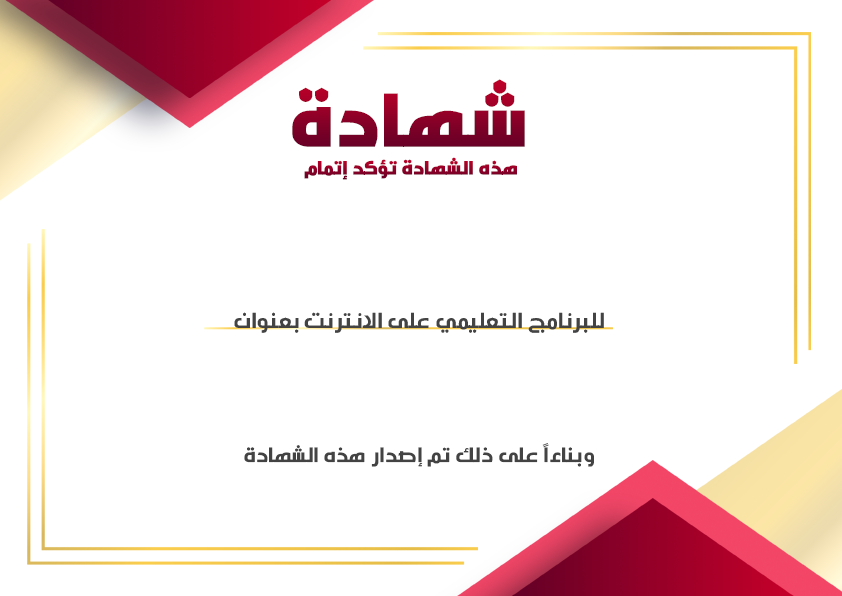
<style>
.page{position:relative;width:842px;height:596px;background:#ffffff}
.page>*{position:absolute;margin:0}
.t1{font:72px "Nasser-Bold";color:#7e0027}
.t2{font:18px "Nasser-Bold";color:#8c0027}
.t3{font:22px "Nasser-Regular";color:#434343}
.t4{font:21px "Nasser-Regular";color:#434343}
</style>
<div class="page">
<p class="t1" style="left:292px;top:79px;width:233px;height:68px">شهادة</p>
<p class="t2" style="left:304px;top:157px;width:213px;height:23px">هذه الشهادة تؤكد إتمام</p>
<p class="t3" style="left:234px;top:312px;width:370px;height:21px">للبرنامج التعليمي على الانترنت بعنوان</p>
<p class="t4" style="left:244px;top:443px;width:350px;height:24px">وبناءاً على ذلك تم إصدار هذه الشهادة</p>
</div>
